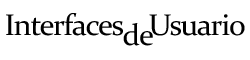
<style>
.page{position:relative;width:250px;height:60px;background:#ffffff}
.page>*{position:absolute;margin:0}
.t1{font:30px "Constantia";letter-spacing:-0.04em;color:#000000;scale:1.03 1}
</style>
<div class="page">
<p class="t1" style="left:6px;top:13px;width:239px;height:23px">Interfaces    Usuario</p>
<p class="t1" style="left:123px;top:23px;width:30px;height:23px">de</p>
</div>
